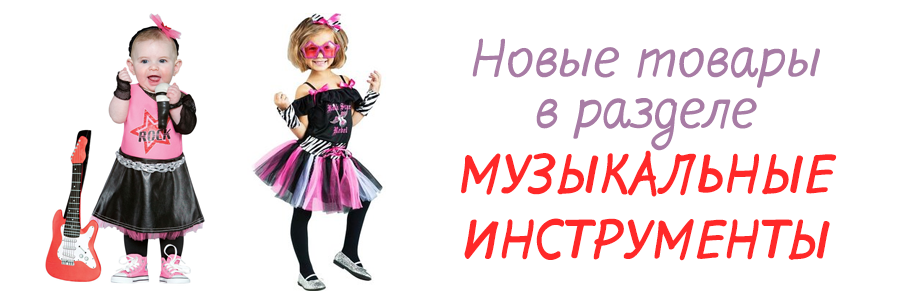
<style>
.page{position:relative;width:900px;height:300px;background:#ffffff}
.page>*{position:absolute;margin:0}
.t1{font:54.6px "Flow-Bold";color:#ff2828;text-transform:uppercase}
.t2{font:54.6px "Flow";color:#a87ca5}
.t3{font:54.6px/51.1px "Flow";color:#a87ca5}
</style>
<div class="page">
<p class="t1" style="left:461px;top:38px;width:376px;height:223px;text-align:center"><span class="t2">Новые товары<br></span><span class="t3">в разделе<br></span>музыкальные<br>инструменты</p>
</div>
